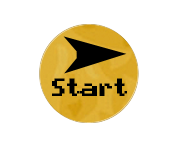
<style>
.page{position:relative;width:173px;height:149px;background:#ffffff}
.page>*{position:absolute;margin:0}
.t1{font:20px "pixelmix-bold";color:#000000}
</style>
<div class="page">
<p class="t1" style="left:52px;top:78px;width:75px;height:18px">Start</p>
</div>
